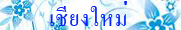
<style>
.page{position:relative;width:181px;height:30px}
.page>*{position:absolute;margin:0}
.t1{font:30px "AngsanaUPC";letter-spacing:0.025em;color:#0824f9}
</style>
<div class="page">
<p class="t1" style="left:50px;top:1px;width:77px;height:25px">เชียงใหม่่</p>
</div>
